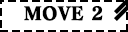
<style>
.page{position:relative;width:128px;height:32px;background:#ffffff}
.page>*{position:absolute;margin:0}
.t1{font:18px "EVA_Matisse_Classic-EB";color:#000000;font-weight:bold}
</style>
<div class="page">
<p class="t1" style="left:24px;top:6px;width:79px;height:15px">MOVE 2</p>
</div>
